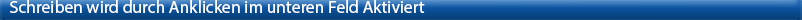
<style>
.page{position:relative;width:802px;height:20px}
.page>*{position:absolute;margin:0}
.t1{font:17.5px "MyriadPro-Regular";color:#ffffff}
</style>
<div class="page">
<p class="t1" style="left:10px;top:0px;width:415px;height:13px">Schreiben wird durch Anklicken im unteren Feld Aktiviert</p>
</div>
